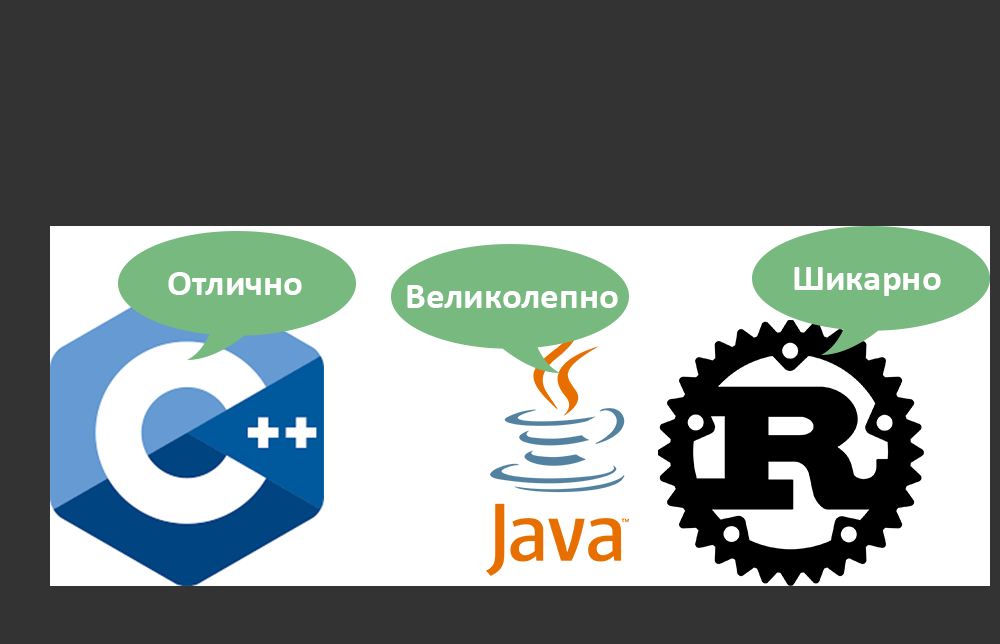
<style>
.page{position:relative;width:1000px;height:644px;background:#333333}
.page>*{position:absolute;margin:0}
.t1{font:37px "Calibri-Bold";color:#ffffff}
</style>
<div class="page">
<p class="t1" style="left:794px;top:267px;width:147px;height:29px">Шикарно</p>
<p class="t1" style="left:168px;top:272px;width:134px;height:23px">Отлично</p>
<p class="t1" style="left:407px;top:285px;width:211px;height:23px">Великолепно</p>
</div>
